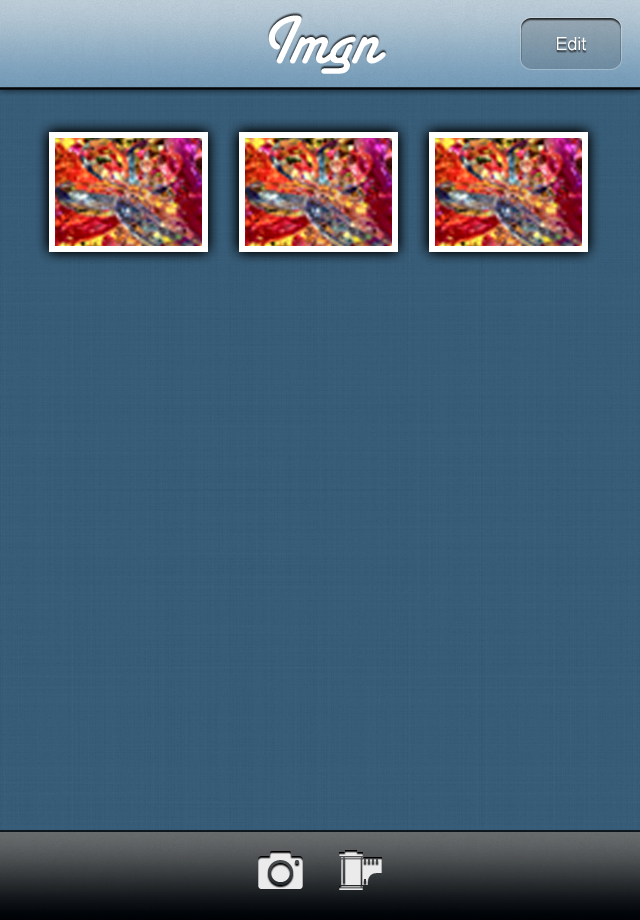
<style>
.page{position:relative;width:640px;height:920px;background:#385d78}
.page>*{position:absolute;margin:0}
.t1{font:72px "SantaFeLetPlain";color:#ffffff}
.t2{font:18px "Helvetica";color:#ffffff}
.t3{font:14px "Helvetica";color:#ffffff}
</style>
<div class="page">
<p class="t1" style="left:268px;top:15px;width:118px;height:59px">Imgn</p>
<p class="t2" style="left:557px;top:37px;width:29px;height:14px"><span class="t3"><br></span>Edit</p>
</div>
